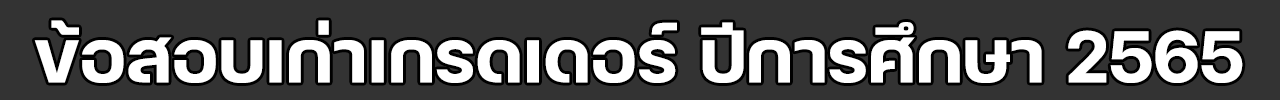
<style>
.page{position:relative;width:1280px;height:100px;background:#333333}
.page>*{position:absolute;margin:0}
.t1{font:100px "FCMinimalBold";color:#ffffff}
</style>
<div class="page">
<p class="t1" style="left:34px;top:20px;width:1209px;height:63px">ข้อสอบเก่าเกรดเดอร์ ปีการศึกษา 2565</p>
</div>
